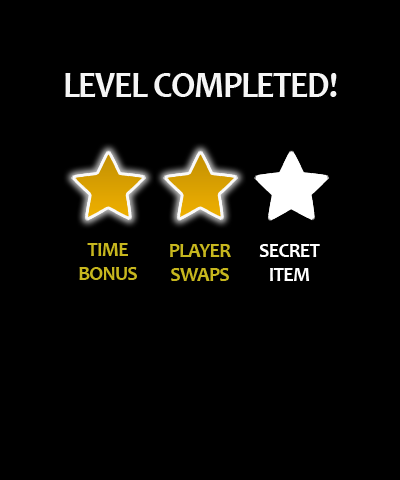
<style>
.page{position:relative;width:400px;height:480px;background:#000000}
.page>*{position:absolute;margin:0}
.t1{font:37.1px "Candara-Bold";letter-spacing:-0.04em;color:#f5f5f5;scale:0.94 1}
.t2{font:21.2px "Candara-Bold";letter-spacing:-0.04em;color:#c7b71e;scale:0.94 1}
.t3{font:21.2px "Candara-Bold";letter-spacing:-0.04em;color:#ffffff;scale:0.94 1}
</style>
<div class="page">
<p class="t1" style="left:65px;top:73px;width:272px;height:24px">LEVEL COMPLETED!</p>
<p class="t2" style="left:79px;top:243px;width:58px;height:37px;text-align:center">TIME<br>BONUS</p>
<p class="t2" style="left:170px;top:244px;width:61px;height:37px;text-align:center">PLAYER<br>SWAPS</p>
<p class="t3" style="left:259px;top:244px;width:61px;height:37px;text-align:center">SECRET<br>ITEM</p>
</div>
